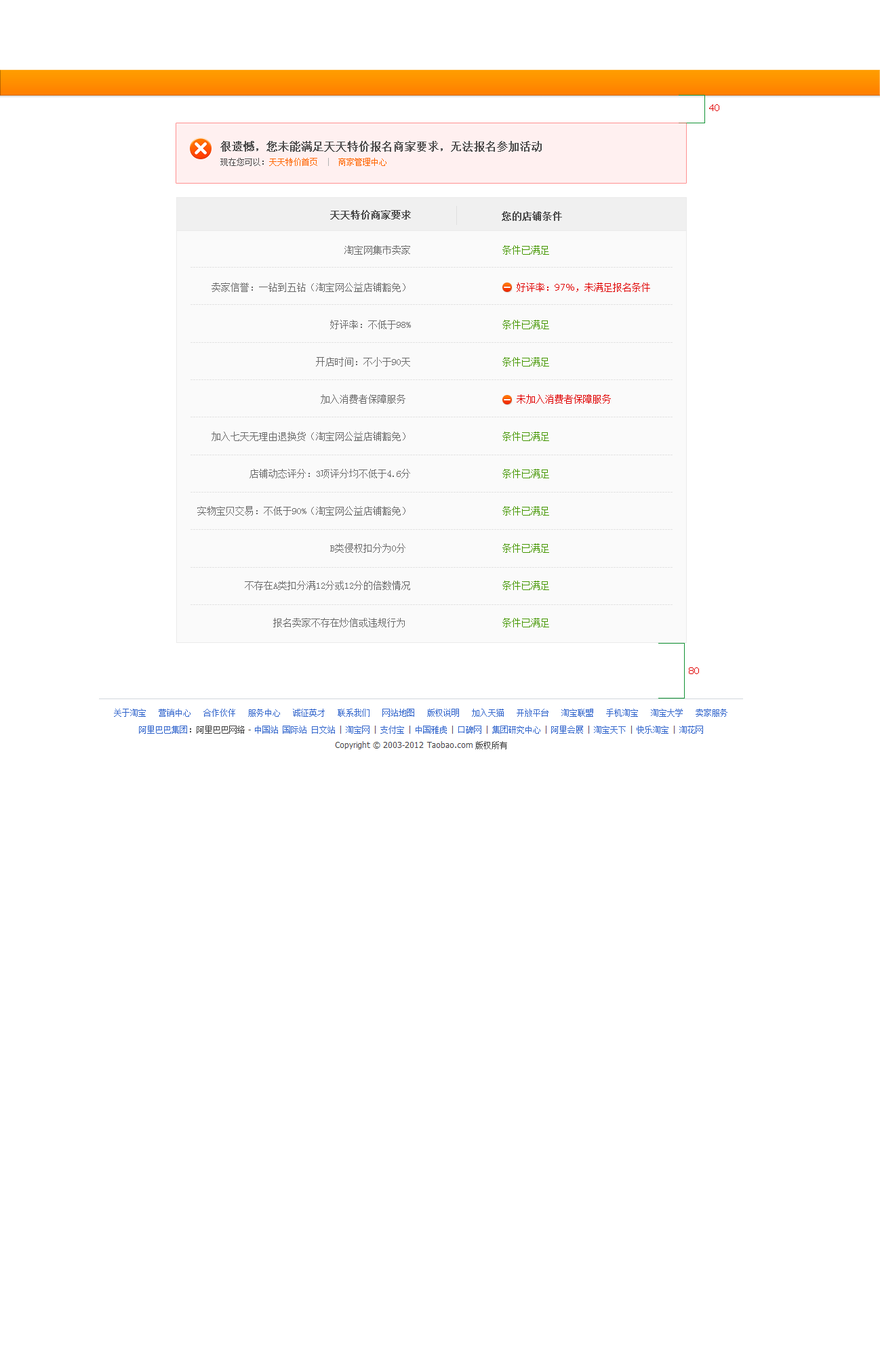
<style>
.page{position:relative;width:880px;height:1355px;background:#ffffff}
.page>*{position:absolute;margin:0}
.t1{font:9.5px "Tahoma";color:#e00000}
.t2{font:10.8px/16.3px "SimSun";color:#4d4d4d;font-weight:bold}
.t3{font:8.1px/16.3px "SimSun";color:#4d4d4d}
.t4{font:8.1px/16.3px "SimSun";color:#ff6600}
.t5{font:8.1px/16.3px "SimSun";color:#b3b3b3}
.t6{font:9.5px "SimSun";color:#4d4d4d;font-weight:bold}
.t7{font:9.5px/37.3px "SimSun";color:#696969}
.t8{font:9.5px/37.3px "SimSun";color:#459700}
.t9{font:9.5px/37.3px "SimSun";color:#e00000}
.t10{font:9.5px/37.3px "Tahoma";color:#e00000}
</style>
<div class="page">
<p class="t1" style="left:709px;top:104px;width:10px;height:7px">40</p>
<p class="t2" style="left:220px;top:141px;width:322px;height:25px">很遗憾，您未能满足天天特价报名商家要求，无法报名参加活动<br><span class="t3">现在您可以：</span><span class="t4">天天特价首页  </span><span class="t5">|  </span><span class="t4">商家管理中心</span></p>
<p class="t6" style="left:330px;top:210px;width:81px;height:10px">天天特价商家要求</p>
<p class="t6" style="left:502px;top:211px;width:60px;height:10px">您的店铺条件</p>
<p class="t7" style="left:197px;top:245px;width:214px;height:383px;text-align:right">淘宝网集市卖家<br>卖家信誉：一钻到五钻（淘宝网公益店铺豁免）<br>好评率：不低于98%<br>开店时间：不小于90天<br>加入消费者保障服务 <br>加入七天无理由退换货（淘宝网公益店铺豁免）<br>店铺动态评分：3项评分均不低于4.6分<br>实物宝贝交易：不低于90%（淘宝网公益店铺豁免）<br>B类侵权扣分为0分 <br>不存在A类扣分满12分或12分的倍数情况<br>报名卖家不存在炒信或违规行为</p>
<p class="t8" style="left:502px;top:245px;width:148px;height:383px">条件已满足<br><span class="t9">   好评率：</span><span class="t10">97%</span><span class="t9">，未满足报名条件<br></span>条件已满足<br>条件已满足<br><span class="t9">   未加入消费者保障服务<br></span>条件已满足<br>条件已满足<br>条件已满足<br>条件已满足<br>条件已满足<br>条件已满足</p>
<p class="t1" style="left:689px;top:668px;width:10px;height:6px">80</p>
</div>
